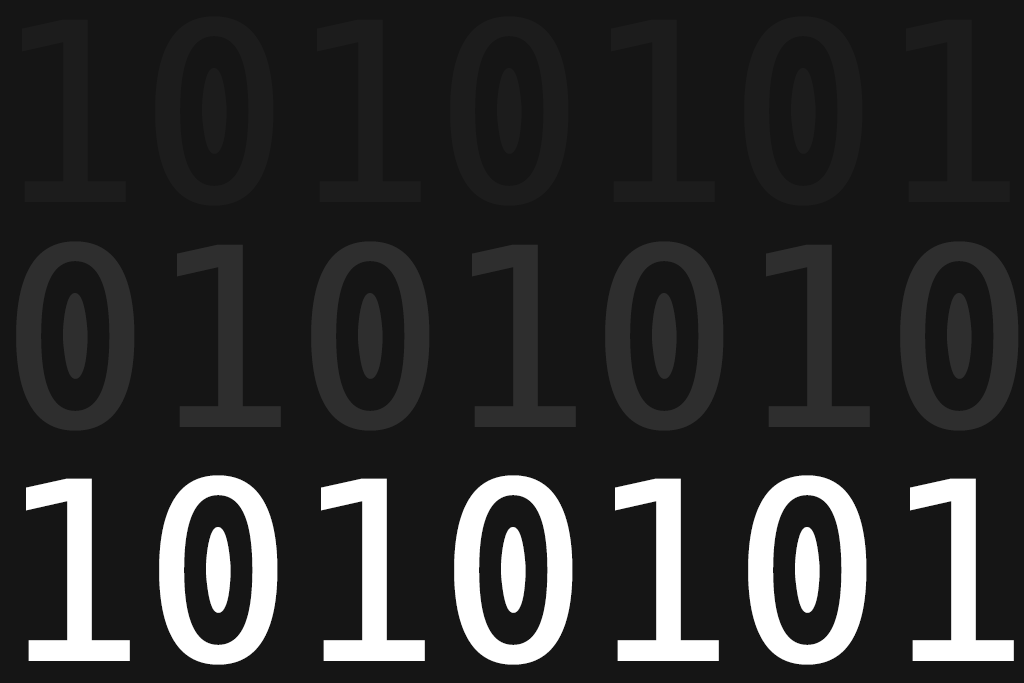
<style>
.page{position:relative;width:1024px;height:683px;background:#151515}
.page>*{position:absolute;margin:0}
.t1{font:250px "Hack-Regular";letter-spacing:-0.015em;color:#1c1c1c}
.t2{font:250px "Hack-Regular";letter-spacing:-0.015em;color:#2e2e2e}
.t3{font:250px "Hack-Regular";letter-spacing:-0.015em;color:#ffffff}
</style>
<div class="page">
<p class="t1" style="left:22px;top:16px;width:988px;height:190px">1010101</p>
<p class="t2" style="left:16px;top:241px;width:1003px;height:190px">0101010</p>
<p class="t3" style="left:26px;top:475px;width:988px;height:190px">1010101</p>
</div>
